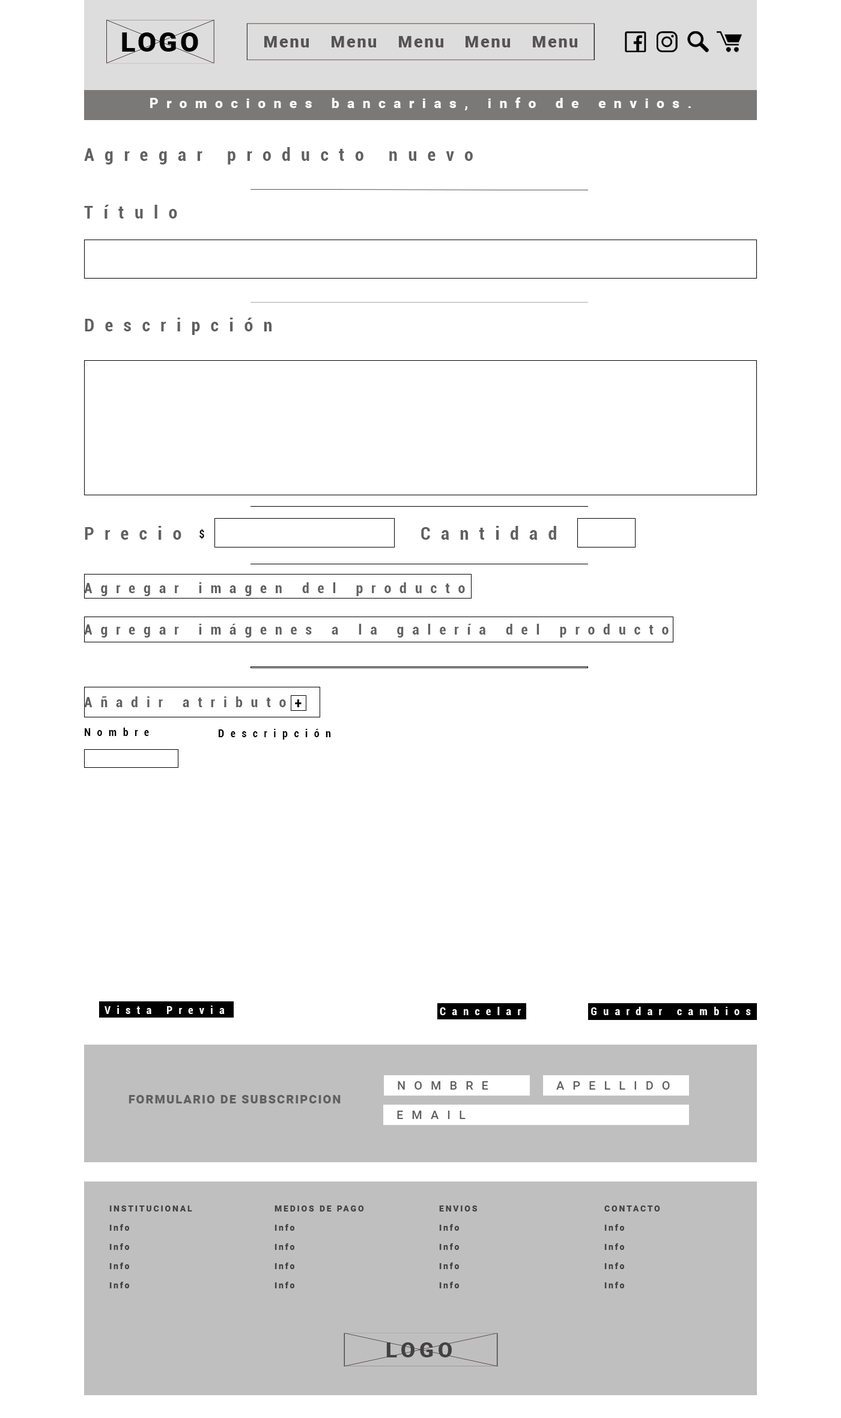
<style>
.page{position:relative;width:841px;height:1418px;background:#ffffff}
.page>*{position:absolute;margin:0}
.t1{font:13.8px "Roboto-Black";letter-spacing:0.58em;color:#fcf9f9}
.t2{font:18px "Roboto-BoldCondensed";letter-spacing:0.58em;color:#606060}
.t3{font:10.8px "Roboto-BoldCondensed";letter-spacing:0.58em;color:#000000}
.t4{font:14.4px "Roboto-BoldCondensed";letter-spacing:0.58em;color:#606060}
.t5{font:14.4px "Roboto-BoldCondensed";letter-spacing:0.58em;color:#000000}
.t6{font:10.8px "Roboto-BoldCondensed";letter-spacing:0.58em;color:#ffffff}
.t7{font:10.8px "Roboto-BoldCondensed";letter-spacing:0.58em;color:#fffefe}
.t8{font:12px "Roboto-Medium";letter-spacing:0.7em;color:#606060}
.t9{font:12px "Roboto-Black";letter-spacing:0.1em;color:#606060}
.t10{font:8.4px/19.2px "Roboto-Black";letter-spacing:0.2em;color:#434242}
</style>
<div class="page">
<p class="t1" style="left:150px;top:97px;width:541px;height:13px">Promociones bancarias, info de envios.</p>
<p class="t2" style="left:84px;top:147px;width:389px;height:18px">Agregar producto nuevo</p>
<p class="t2" style="left:84px;top:205px;width:93px;height:14px">Título</p>
<p class="t2" style="left:85px;top:318px;width:186px;height:17px">Descripción</p>
<p class="t2" style="left:85px;top:526px;width:96px;height:14px">Precio</p>
<p class="t3" style="left:199px;top:529px;width:5px;height:10px">$</p>
<p class="t2" style="left:421px;top:526px;width:135px;height:14px">Cantidad</p>
<p class="t4" style="left:84px;top:582px;width:381px;height:14px">Agregar imagen del producto</p>
<p class="t4" style="left:84px;top:624px;width:584px;height:14px">Agregar imágenes a la galería del producto</p>
<p class="t4" style="left:84px;top:696px;width:202px;height:11px">Añadir atributo</p>
<p class="t5" style="left:295px;top:700px;width:6px;height:7px">+</p>
<p class="t3" style="left:85px;top:728px;width:64px;height:8px">Nombre</p>
<p class="t3" style="left:219px;top:729px;width:112px;height:11px">Descripción</p>
<p class="t6" style="left:104px;top:1006px;width:121px;height:8px">Vista Previa</p>
<p class="t7" style="left:440px;top:1007px;width:81px;height:8px">Cancelar</p>
<p class="t6" style="left:591px;top:1007px;width:160px;height:8px">Guardar cambios</p>
<p class="t8" style="left:398px;top:1082px;width:90px;height:8px">NOMBRE</p>
<p class="t8" style="left:556px;top:1082px;width:114px;height:8px">APELLIDO</p>
<p class="t9" style="left:129px;top:1095px;width:211px;height:9px">FORMULARIO DE SUBSCRIPCION</p>
<p class="t8" style="left:397px;top:1111px;width:68px;height:8px">EMAIL</p>
<p class="t10" style="left:109px;top:1206px;width:83px;height:83px">INSTITUCIONAL<br>Info<br>Info<br>Info<br>Info</p>
<p class="t10" style="left:274px;top:1206px;width:90px;height:83px">MEDIOS DE PAGO<br>Info<br>Info<br>Info<br>Info</p>
<p class="t10" style="left:439px;top:1206px;width:38px;height:83px">ENVIOS<br>Info<br>Info<br>Info<br>Info</p>
<p class="t10" style="left:604px;top:1206px;width:56px;height:83px">CONTACTO<br>Info<br>Info<br>Info<br>Info</p>
</div>
